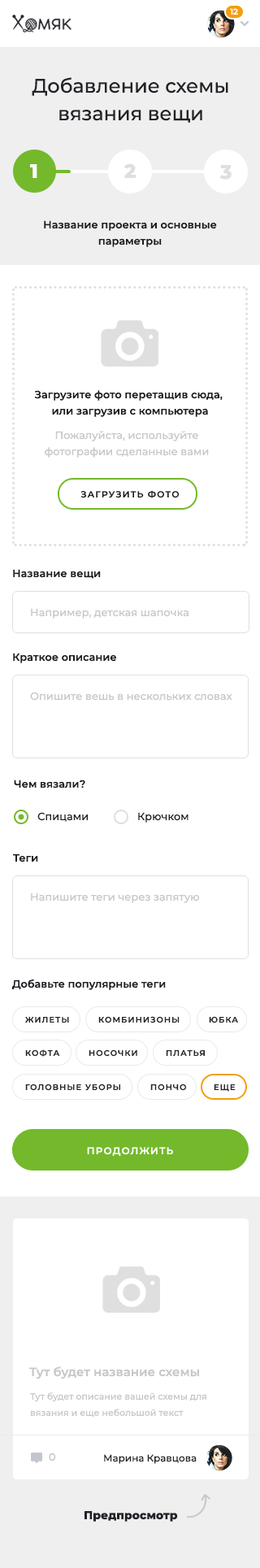
<style>
.page{position:relative;width:260px;height:1568px;background:#ffffff}
.page>*{position:absolute;margin:0}
.t1{font:8.1px "Montserrat-SemiBold";color:#ffffff}
.t2{font:19.5px/27.6px "Montserrat-Medium";color:#222328}
.t3{font:19.5px "Montserrat-ExtraBold";color:#ffffff}
.t4{font:19.5px "Montserrat-ExtraBold";color:#dfdfdf}
.t5{font:10.6px/16.3px "Montserrat-SemiBold";color:#1c1e23}
.t6{font:10.6px/16.3px "Montserrat-Medium";color:#c8c8c8}
.t7{font:8.9px "Montserrat-SemiBold";letter-spacing:0.1em;color:#1c1e23;text-transform:uppercase}
.t8{font:10.6px "Montserrat-SemiBold";color:#1c1e23}
.t9{font:10.6px "Montserrat-Medium";color:#c8c8c8}
.t10{font:10.6px "Montserrat-Medium";color:#1c1e23}
.t11{font:8.1px "Montserrat-SemiBold";letter-spacing:0.1em;color:#222328;text-transform:uppercase}
.t12{font:9.8px "Montserrat-SemiBold";letter-spacing:0.1em;color:#ffffff;text-transform:uppercase}
.t13{font:12.2px "Montserrat-SemiBold";color:#c8c8c8}
.t14{font:8.9px/16.3px "Montserrat-Medium";color:#c8c8c8}
.t15{font:10.6px "Montserrat-Medium";color:#c2c5ce}
.t16{font:9.8px "Montserrat-Medium";color:#222328}
.t17{font:11.4px "Montserrat-ExtraBold";color:#222328}
</style>
<div class="page">
<p class="t1" style="left:230px;top:8px;width:8px;height:7px">12</p>
<p class="t2" style="left:32px;top:77px;width:196px;height:46px;text-align:center">Добавление схемы<br>вязания вещи</p>
<p class="t3" style="left:30px;top:164px;width:7px;height:14px">1</p>
<p class="t4" style="left:124px;top:163px;width:12px;height:15px">2</p>
<p class="t4" style="left:219px;top:165px;width:13px;height:15px">3</p>
<p class="t5" style="left:44px;top:220px;width:173px;height:27px;text-align:center">Название проекта и основные<br>параметры</p>
<p class="t5" style="left:34px;top:390px;width:189px;height:27px;text-align:center">Загрузите фото перетащив сюда, <br>или загрузив с компьютера</p>
<p class="t6" style="left:45px;top:431px;width:164px;height:27px;text-align:center">Пожалуйста, используйте<br>фотографии сделанные вами</p>
<p class="t7" style="left:80px;top:490px;width:100px;height:8px">Загрузить фото</p>
<p class="t8" style="left:13px;top:569px;width:88px;height:10px">Название вещи</p>
<p class="t9" style="left:31px;top:608px;width:158px;height:11px">Например, детская шапочка</p>
<p class="t8" style="left:13px;top:653px;width:103px;height:10px">Краткое описание</p>
<p class="t9" style="left:30px;top:692px;width:202px;height:9px">Опишите вешь в нескольких словах</p>
<p class="t8" style="left:14px;top:780px;width:71px;height:8px">Чем вязали?</p>
<p class="t10" style="left:37px;top:812px;width:51px;height:10px">Спицами</p>
<p class="t10" style="left:138px;top:812px;width:51px;height:11px">Крючком</p>
<p class="t8" style="left:13px;top:853px;width:25px;height:9px">Теги</p>
<p class="t9" style="left:31px;top:893px;width:169px;height:10px">Напишите теги через запятую</p>
<p class="t8" style="left:12px;top:979px;width:154px;height:11px">Добавьте популярные теги</p>
<p class="t11" style="left:25px;top:1017px;width:44px;height:6px">Жилеты</p>
<p class="t11" style="left:98px;top:1016px;width:82px;height:7px">комбинизоны</p>
<p class="t11" style="left:209px;top:1016px;width:29px;height:7px">юбка</p>
<p class="t11" style="left:25px;top:1049px;width:35px;height:8px">кофта</p>
<p class="t11" style="left:89px;top:1049px;width:48px;height:8px">носочки</p>
<p class="t11" style="left:166px;top:1050px;width:39px;height:7px">платья</p>
<p class="t11" style="left:25px;top:1084px;width:95px;height:7px">головные уборы</p>
<p class="t11" style="left:150px;top:1084px;width:37px;height:7px">пончо</p>
<p class="t11" style="left:214px;top:1084px;width:22px;height:8px">еще</p>
<p class="t12" style="left:87px;top:1147px;width:86px;height:9px">продолжить</p>
<p class="t13" style="left:29px;top:1366px;width:170px;height:13px">Тут будет название схемы</p>
<p class="t14" style="left:30px;top:1392px;width:176px;height:26px">Тут будет описание вашей схемы для вязания и еще небольшой текст</p>
<p class="t15" style="left:49px;top:1453px;width:7px;height:9px">0</p>
<p class="t16" style="left:104px;top:1454px;width:93px;height:10px">Марина Кравцова</p>
<p class="t17" style="left:85px;top:1511px;width:93px;height:11px">Предпросмотр</p>
</div>
